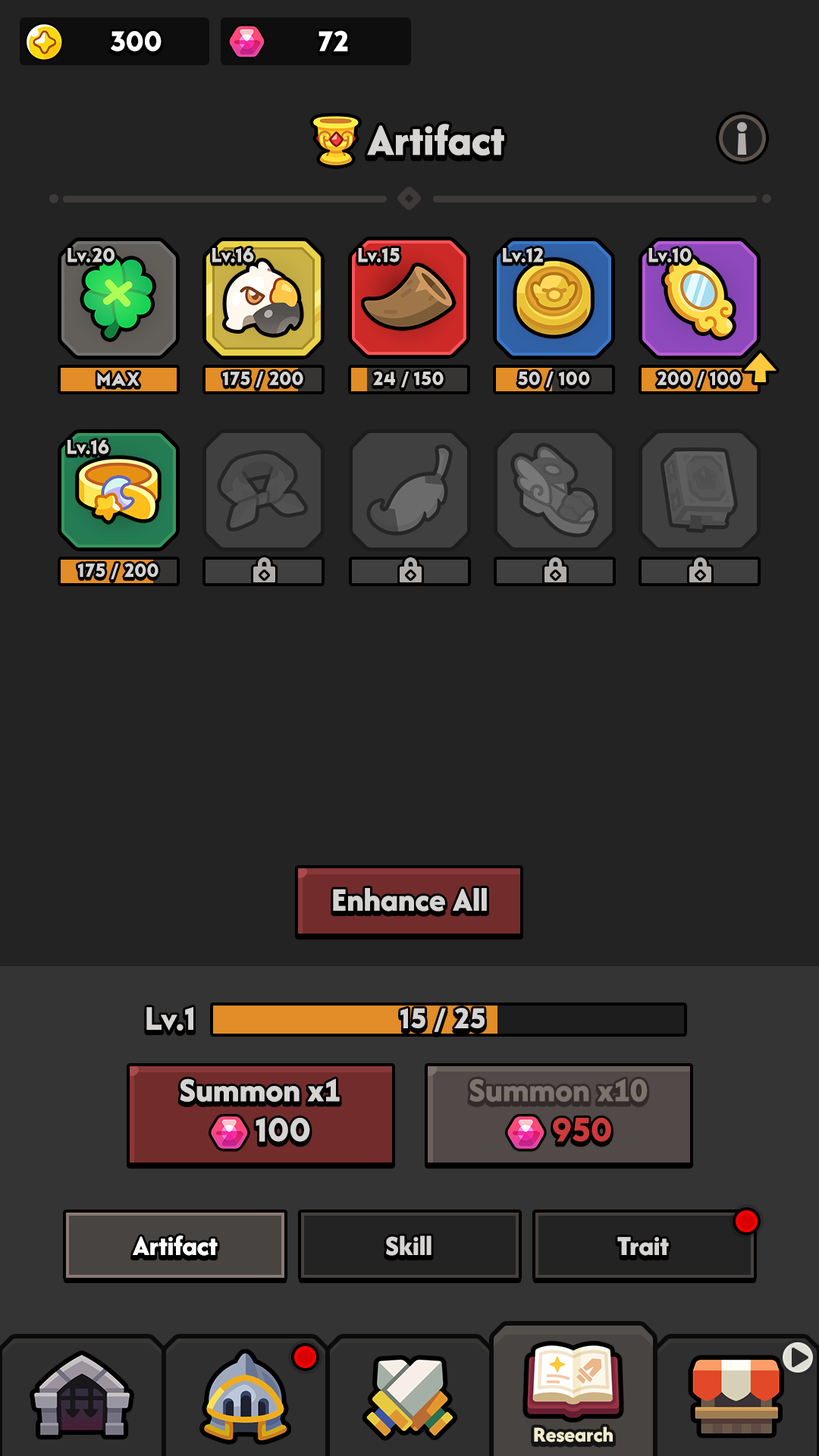
<style>
.page{position:relative;width:819px;height:1456px;background:#232323}
.page>*{position:absolute;margin:0}
.t1{font:29.6px "LTAvocado-Bold";color:#ffffff}
.t2{font:45.5px "AfacadFlux-ExtraBold";color:#d6d4d3}
.t3{font:20.5px "LTAvocado-Bold";color:#d6d4d3}
.t4{font:19.7px "LTAvocado-Bold";color:#d6d4d3;text-transform:uppercase}
.t5{font:34.1px "AfacadFlux-ExtraBold";color:#d6d4d3}
.t6{font:33.4px "LTAvocado-Bold";color:#d6d4d3}
.t7{font:29.6px "LTAvocado-Bold";color:#d6d4d3;text-transform:uppercase}
.t8{font:34.9px "AfacadFlux-ExtraBold";color:#d6d4d3}
.t9{font:34.9px "AfacadFlux-ExtraBold";color:#7b736e}
.t10{font:34.9px "LTAvocado-Bold";color:#d6d4d3}
.t11{font:34.9px "LTAvocado-Bold";color:#cb3b3b}
.t12{font:28.4px "AfacadFlux-ExtraBold";color:#ffffff}
.t13{font:28.8px "AfacadFlux-ExtraBold";color:#ffffff}
.t14{font:28.8px "AfacadFlux-ExtraBold";color:#d6d4d3}
.t15{font:22px "AfacadFlux-ExtraBold";color:#f1ebcc}
</style>
<div class="page">
<p class="t1" style="left:111px;top:31px;width:51px;height:21px">300</p>
<p class="t1" style="left:318px;top:30px;width:30px;height:22px">72</p>
<p class="t2" style="left:367px;top:124px;width:137px;height:31px">Artifact</p>
<p class="t3" style="left:67px;top:248px;width:48px;height:14px">Lv.20</p>
<p class="t3" style="left:212px;top:248px;width:42px;height:14px">Lv.16</p>
<p class="t3" style="left:358px;top:248px;width:42px;height:14px">Lv.15</p>
<p class="t3" style="left:503px;top:248px;width:40px;height:14px">Lv.12</p>
<p class="t3" style="left:648px;top:248px;width:44px;height:14px">Lv.10</p>
<p class="t4" style="left:97px;top:372px;width:43px;height:14px">Max</p>
<p class="t4" style="left:223px;top:372px;width:80px;height:16px">175 / 200</p>
<p class="t4" style="left:373px;top:372px;width:71px;height:16px">24 / 150</p>
<p class="t4" style="left:518px;top:372px;width:72px;height:16px">50 / 100</p>
<p class="t4" style="left:657px;top:372px;width:84px;height:16px">200 / 100</p>
<p class="t3" style="left:67px;top:440px;width:42px;height:14px">Lv.16</p>
<p class="t4" style="left:78px;top:563px;width:80px;height:16px">175 / 200</p>
<p class="t5" style="left:333px;top:888px;width:154px;height:24px">Enhance All</p>
<p class="t6" style="left:146px;top:1007px;width:47px;height:24px">Lv.1</p>
<p class="t7" style="left:400px;top:1008px;width:85px;height:24px">15 / 25</p>
<p class="t8" style="left:180px;top:1078px;width:160px;height:24px">Summon x1</p>
<p class="t9" style="left:469px;top:1078px;width:179px;height:24px">Summon x10</p>
<p class="t10" style="left:256px;top:1118px;width:54px;height:24px">100</p>
<p class="t11" style="left:553px;top:1118px;width:58px;height:24px">950</p>
<p class="t12" style="left:133px;top:1235px;width:84px;height:21px">Artifact</p>
<p class="t13" style="left:133px;top:1235px;width:85px;height:21px">Artifact</p>
<p class="t14" style="left:386px;top:1235px;width:45px;height:21px">Skill</p>
<p class="t14" style="left:617px;top:1237px;width:52px;height:19px">Trait</p>
<p class="t15" style="left:534px;top:1426px;width:79px;height:16px">Research</p>
</div>
